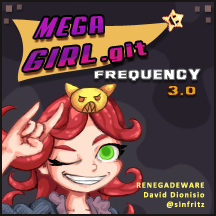
<style>
.page{position:relative;width:216px;height:216px}
.page>*{position:absolute;margin:0}
.t1{font:24px "Aero";letter-spacing:0.125em}
.t2{font:20px "Aero";letter-spacing:0.125em}
.t3{font:10px "Ash";letter-spacing:0.125em;color:#ffffff}
.t4{font:10px "Ash";letter-spacing:0.125em;color:#e6a21e}
.t5{font:8px "Calibri-Bold";letter-spacing:0.125em;color:#fff568}
</style>
<div class="page">
<p class="t1" style="left:23px;top:16px;width:124px;height:55px;rotate:-5deg">MEGA <br>GIRL<span class="t2">.git</span></p>
<p class="t3" style="left:94px;top:69px;width:107px;height:12px">FREQUENCY</p>
<p class="t4" style="left:167px;top:85px;width:29px;height:11px">3.0</p>
<p class="t5" style="left:136px;top:182px;width:69px;height:26px;text-align:right">RENEGADEWARE<br>David Dionisio<br>@sinfritz</p>
</div>
